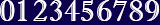
<style>
.page{position:relative;width:160px;height:25px;background:#0d004c}
.page>*{position:absolute;margin:0}
.t1{font:30px "ImprintMT-Shadow";color:#ffffff}
</style>
<div class="page">
<p class="t1" style="left:0px;top:0px;width:15px;height:21px">0</p>
<p class="t1" style="left:18px;top:0px;width:9px;height:21px">1</p>
<p class="t1" style="left:33px;top:0px;width:15px;height:21px">2</p>
<p class="t1" style="left:50px;top:0px;width:12px;height:21px">3</p>
<p class="t1" style="left:64px;top:0px;width:16px;height:21px">4</p>
<p class="t1" style="left:81px;top:0px;width:13px;height:21px">5</p>
<p class="t1" style="left:97px;top:0px;width:15px;height:21px">6</p>
<p class="t1" style="left:113px;top:0px;width:14px;height:21px">7</p>
<p class="t1" style="left:129px;top:0px;width:14px;height:21px">8</p>
<p class="t1" style="left:145px;top:0px;width:15px;height:21px">9</p>
</div>
